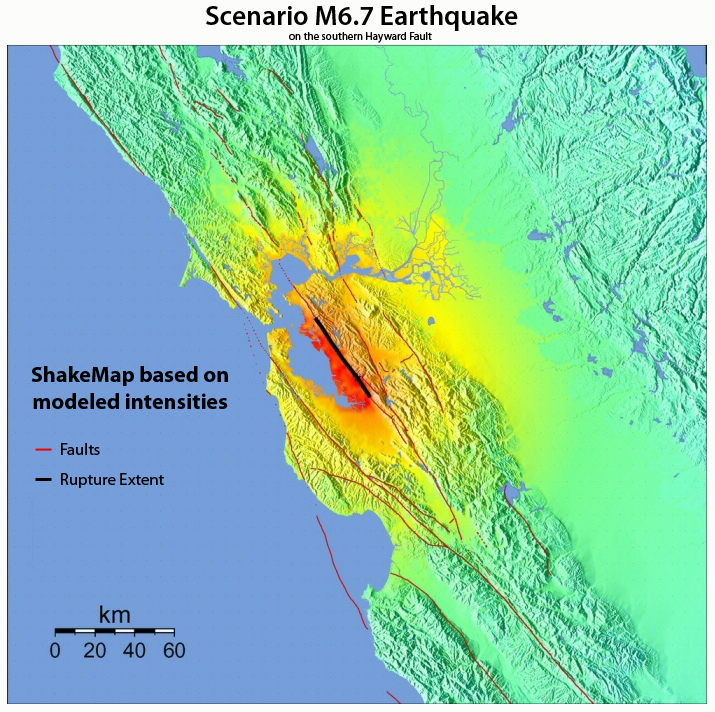
<style>
.page{position:relative;width:715px;height:712px}
.page>*{position:absolute;margin:0}
.t1{font:27.8px "MyriadPro-Semibold";color:#000000}
.t2{font:11.1px "MyriadPro-Regular";color:#000000}
.t3{font:22.2px "MyriadPro-Bold";color:#000000}
.t4{font:16.7px "MyriadPro-Regular";color:#000000}
</style>
<div class="page">
<p class="t1" style="left:206px;top:5px;width:312px;height:26px">Scenario M6.7 Earthquake</p>
<p class="t2" style="left:289px;top:32px;width:143px;height:11px">on the southern Hayward Fault</p>
<p class="t3" style="left:31px;top:366px;width:197px;height:43px;text-align:center">ShakeMap based on<br>modeled intensities</p>
<p class="t4" style="left:61px;top:443px;width:39px;height:12px">Faults</p>
<p class="t4" style="left:61px;top:473px;width:103px;height:15px">Rupture Extent</p>
</div>
